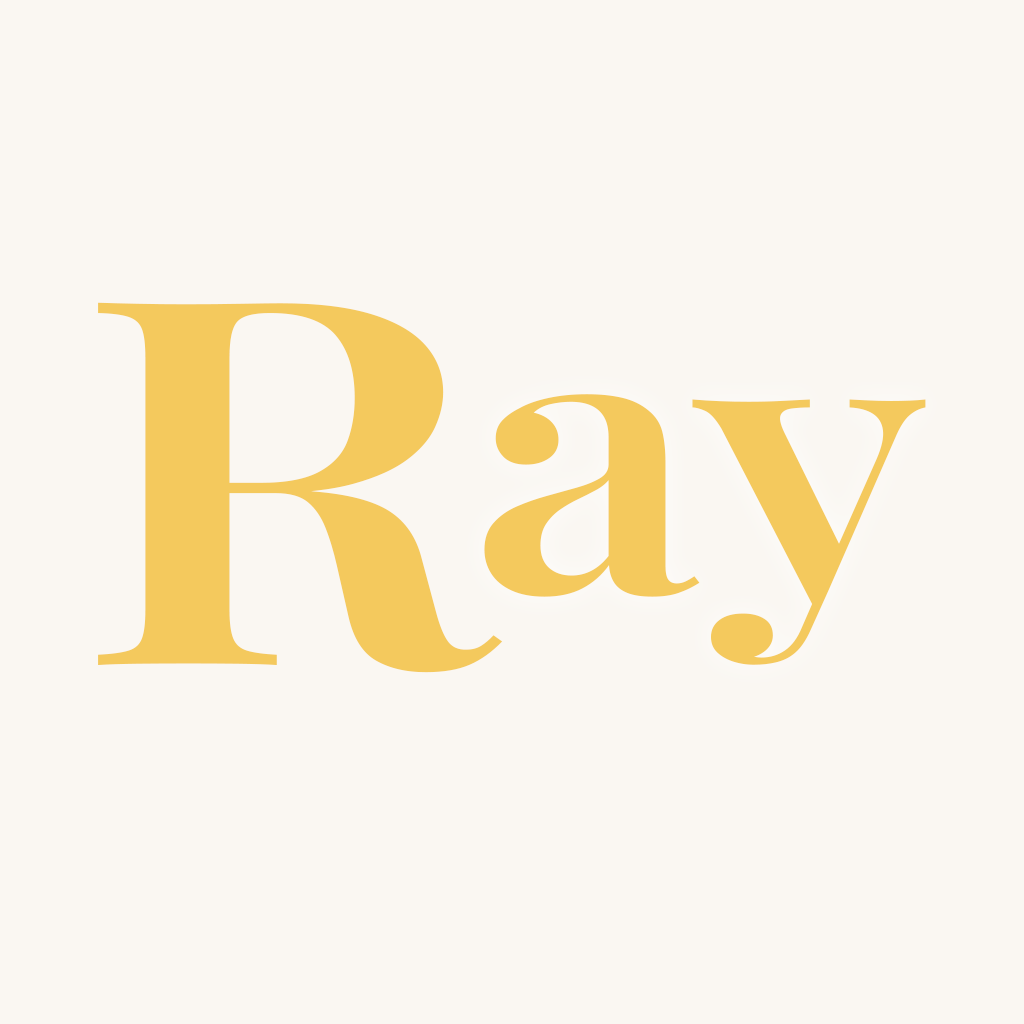
<style>
.page{position:relative;width:1024px;height:1024px;background:#faf7f2}
.page>*{position:absolute;margin:0}
.t1{font:511.6px "PlayfairDisplayRoman-SemiBold";letter-spacing:0.02em;color:#f4c95d;scale:1.2 1}
.t2{font:376.2px "PlayfairDisplayRoman-SemiBold";letter-spacing:0.02em;color:#f4c95d;scale:1.2 1}
</style>
<div class="page">
<p class="t1" style="left:98px;top:302px;width:405px;height:371px">R</p>
<p class="t2" style="left:484px;top:394px;width:442px;height:271px">ay</p>
</div>
